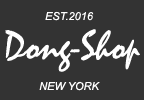
<style>
.page{position:relative;width:144px;height:100px;background:#333333}
.page>*{position:absolute;margin:0}
.t1{font:11px "Arial-ItalicMT";color:#ffffff}
.t2{font:42px "Mistral";color:#ffffff}
</style>
<div class="page">
<p class="t1" style="left:45px;top:11px;width:49px;height:10px">EST.2016</p>
<p class="t2" style="left:5px;top:29px;width:135px;height:43px">Dong-Shop</p>
<p class="t1" style="left:39px;top:81px;width:61px;height:10px">NEW YORK</p>
</div>
